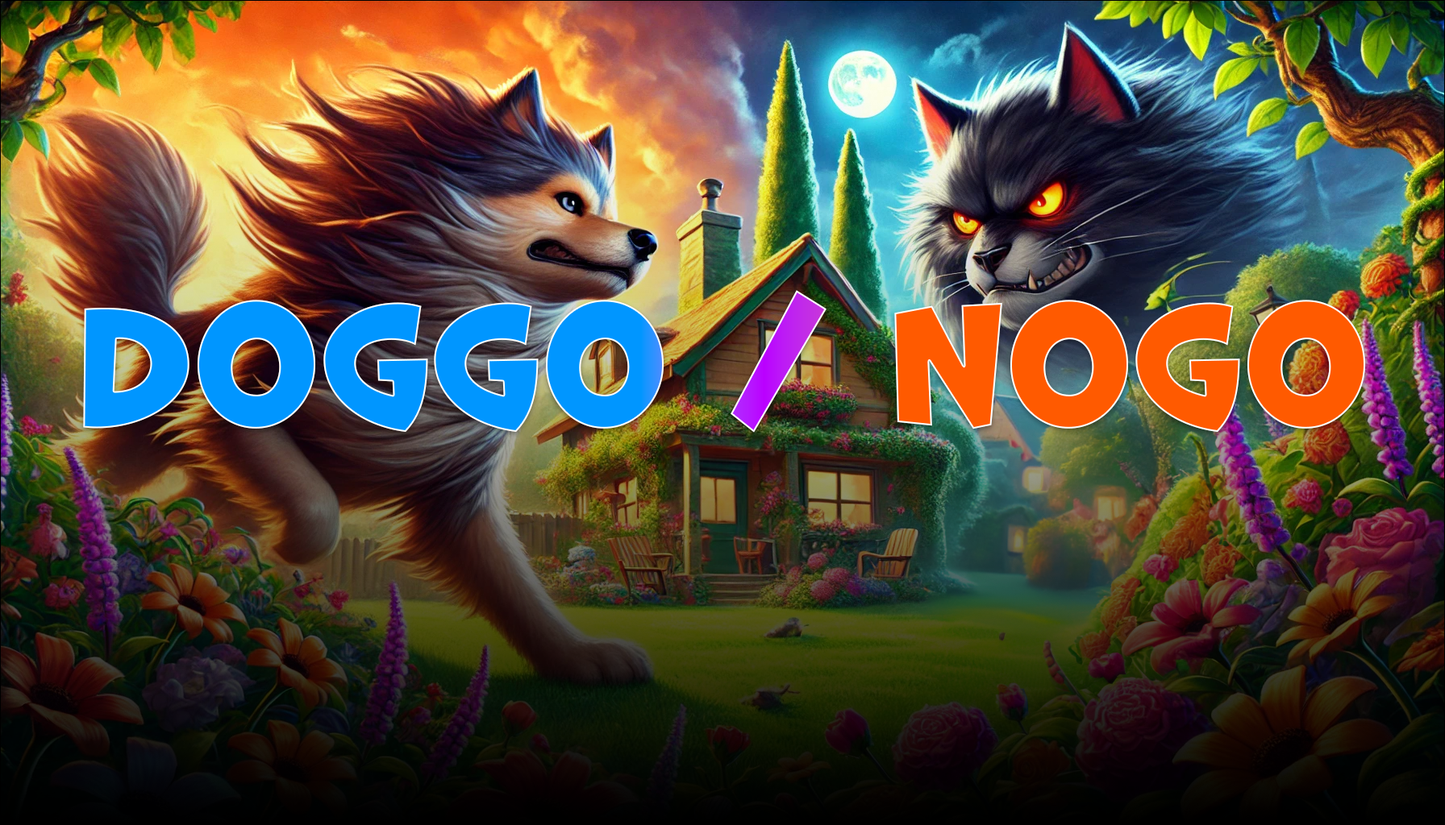
<style>
.page{position:relative;width:1445px;height:825px}
.page>*{position:absolute;margin:0}
.t1{font:161.2px "Marvin"}
</style>
<div class="page">
<p class="t1" style="left:83px;top:290px;width:1283px;height:143px">Doggo / Nogo</p>
</div>
